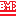
<style>
.page{position:relative;width:16px;height:16px;background:#ffffff}
.page>*{position:absolute;margin:0}
.t1{font:13px "Silkscreen";color:#ffffff}
.t2{font:14px "Silkscreen";color:#ffffff}
</style>
<div class="page">
<p class="t1" style="left:0px;top:2px;width:5px;height:8px">b</p>
<p class="t1" style="left:4px;top:2px;width:8px;height:8px">M</p>
<p class="t2" style="left:10px;top:2px;width:7px;height:8px">C</p>
</div>
